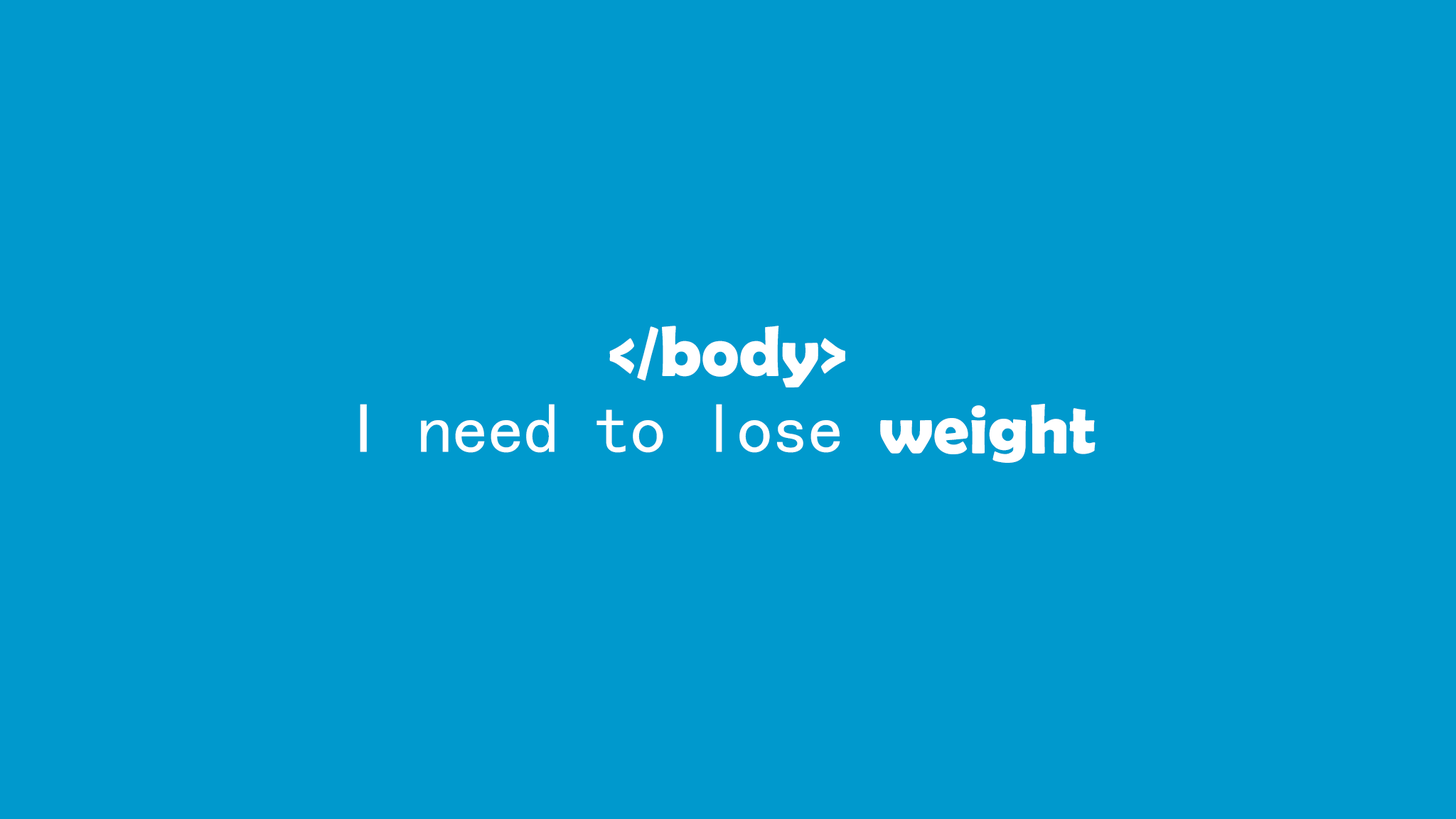
<style>
.page{position:relative;width:1456px;height:819px;background:#0099cd}
.page>*{position:absolute;margin:0}
.t1{font:71.1px "BerlinSansFBDemi-Bold";color:#ffffff}
.t2{font:71.1px "SimHei";color:#ffffff}
</style>
<div class="page">
<p class="t1" style="left:609px;top:326px;width:236px;height:61px">&lt;/body&gt;</p>
<p class="t2" style="left:360px;top:404px;width:736px;height:59px">I need to lose <span class="t1">weight</span></p>
</div>
